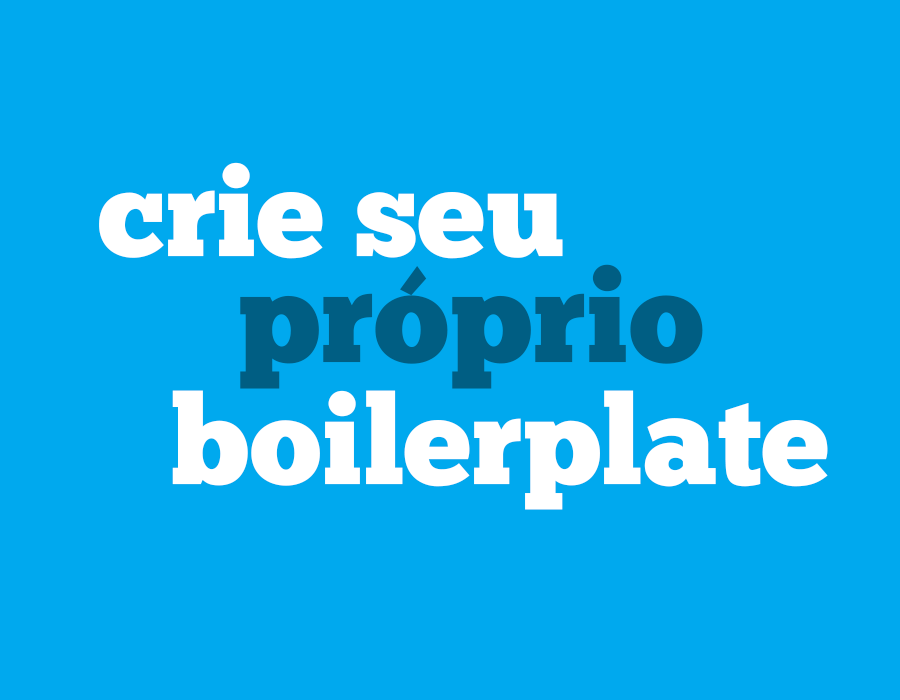
<style>
.page{position:relative;width:900px;height:700px;background:#00a9ee}
.page>*{position:absolute;margin:0}
.t1{font:124.4px "ChunkFive-Roman";color:#ffffff}
.t2{font:130px "ChunkFive-Roman";color:#005e83}
</style>
<div class="page">
<p class="t1" style="left:99px;top:162px;width:464px;height:97px">crie seu</p>
<p class="t2" style="left:240px;top:264px;width:463px;height:125px">próprio</p>
<p class="t1" style="left:172px;top:390px;width:656px;height:120px">boilerplate</p>
</div>
